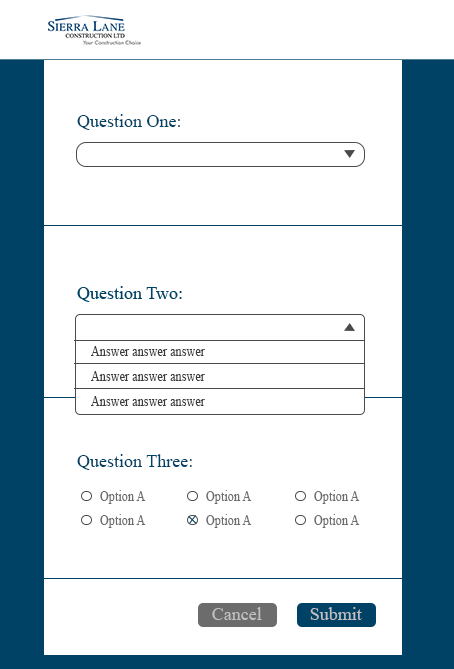
<style>
.page{position:relative;width:454px;height:669px;background:#ffffff}
.page>*{position:absolute;margin:0}
.t1{font:18px "TimesNewRomanPSMT";color:#004265}
.t2{font:14.9px "TimesNewRomanPSMT";color:#3c3b3b;scale:0.82 1}
.t3{font:14.9px "TimesNewRomanPSMT";color:#6c6c6c;scale:0.82 1}
.t4{font:18px "TimesNewRomanPSMT";color:#c0c0c0}
</style>
<div class="page">
<p class="t1" style="left:77px;top:114px;width:103px;height:16px">Question One:</p>
<p class="t2" style="left:91px;top:346px;width:114px;height:10px">Answer answer answer</p>
<p class="t2" style="left:91px;top:371px;width:114px;height:10px">Answer answer answer</p>
<p class="t2" style="left:91px;top:396px;width:114px;height:10px">Answer answer answer</p>
<p class="t1" style="left:77px;top:454px;width:115px;height:16px">Question Three:</p>
<p class="t3" style="left:100px;top:490px;width:46px;height:14px">Option A</p>
<p class="t3" style="left:206px;top:490px;width:46px;height:14px">Option A</p>
<p class="t3" style="left:314px;top:490px;width:46px;height:14px">Option A</p>
<p class="t3" style="left:100px;top:514px;width:46px;height:14px">Option A</p>
<p class="t3" style="left:206px;top:514px;width:46px;height:14px">Option A</p>
<p class="t3" style="left:314px;top:514px;width:46px;height:14px">Option A</p>
<p class="t4" style="left:212px;top:607px;width:50px;height:13px">Cancel</p>
<p class="t4" style="left:310px;top:607px;width:52px;height:13px">Submit</p>
</div>
